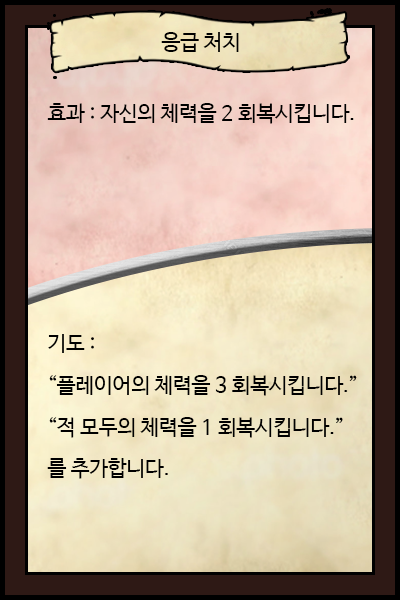
<style>
.page{position:relative;width:400px;height:600px}
.page>*{position:absolute;margin:0}
.t1{font:20.8px "NanumBarunGothic";color:#000000}
.t2{font:20.8px/41.7px "NanumBarunGothic";color:#000000}
</style>
<div class="page">
<p class="t1" style="left:161px;top:32px;width:78px;height:20px">응급 처치</p>
<p class="t1" style="left:47px;top:103px;width:307px;height:21px">효과 : 자신의 체력을 2 회복시킵니다.</p>
<p class="t2" style="left:47px;top:334px;width:310px;height:145px">기도 : <br>“플레이어의 체력을 3 회복시킵니다.”<br>“적 모두의 체력을 1 회복시킵니다.”<br>를 추가합니다.</p>
</div>
